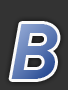
<style>
.page{position:relative;width:68px;height:90px;background:#333333}
.page>*{position:absolute;margin:0}
.t1{font:77px "ProductSans-BoldItalic";letter-spacing:-0.22em}
</style>
<div class="page">
<p class="t1" style="left:11px;top:24px;width:47px;height:55px">B</p>
</div>
